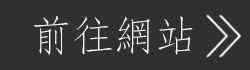
<style>
.page{position:relative;width:250px;height:70px;background:#313131}
.page>*{position:absolute;margin:0}
.t1{font:41.7px "DFFangSong-W2-HKP-BF";color:#ffffff}
</style>
<div class="page">
<p class="t1" style="left:34px;top:16px;width:159px;height:39px">前往網站</p>
</div>
